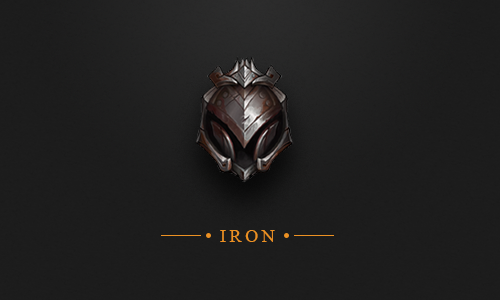
<style>
.page{position:relative;width:500px;height:300px;background:#1c1c1c}
.page>*{position:absolute;margin:0}
.t1{font:18px "TimesNewRomanPSMT";letter-spacing:0.2em;color:#ec9123}
</style>
<div class="page">
<p class="t1" style="left:220px;top:230px;width:55px;height:12px">IRON</p>
</div>
